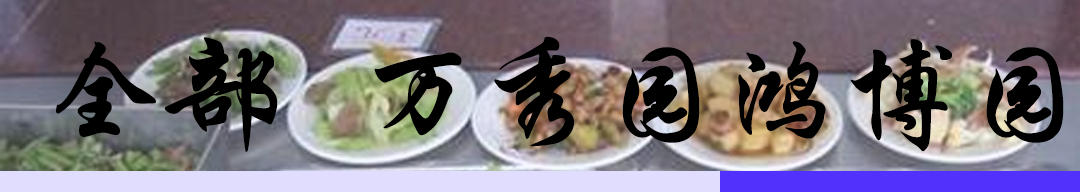
<style>
.page{position:relative;width:1080px;height:192px}
.page>*{position:absolute;margin:0}
.t1{font:120px "STXingkai";color:#000000}
</style>
<div class="page">
<p class="t1" style="left:56px;top:37px;width:222px;height:115px">全部</p>
<p class="t1" style="left:374px;top:36px;width:326px;height:111px">万秀园</p>
<p class="t1" style="left:738px;top:39px;width:326px;height:113px">鸿博园</p>
</div>
